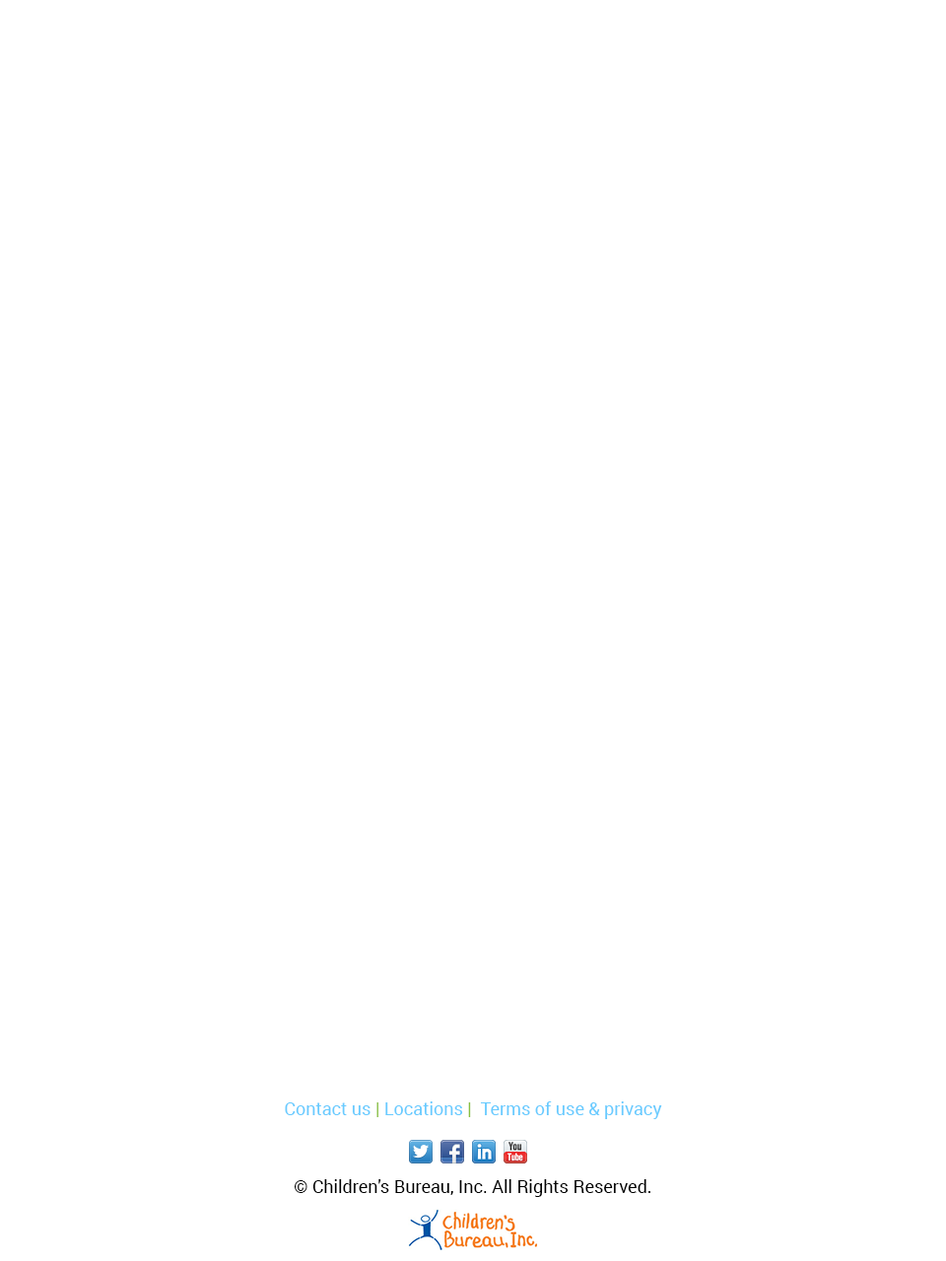
<style>
.page{position:relative;width:946px;height:1261px;background:#ffffff}
.page>*{position:absolute;margin:0}
.t1{font:17.7px "Roboto-Regular";color:#68cbff}
.t2{font:17.7px "Roboto-Regular";color:#89c041}
.t3{font:17.7px "Roboto-Regular";color:#000000}
</style>
<div class="page">
<p class="t1" style="left:285px;top:1101px;width:377px;height:18px;text-align:center">Contact us <span class="t2">| </span>Locations <span class="t2">|  </span>Terms of use &amp; privacy <span class="t2"><br>Terms of S</span></p>
<p class="t3" style="left:294px;top:1179px;width:356px;height:18px;text-align:center">© Children's Bureau, Inc. All Rights Reserved.<br><br>All Rights Reserved.</p>
</div>
